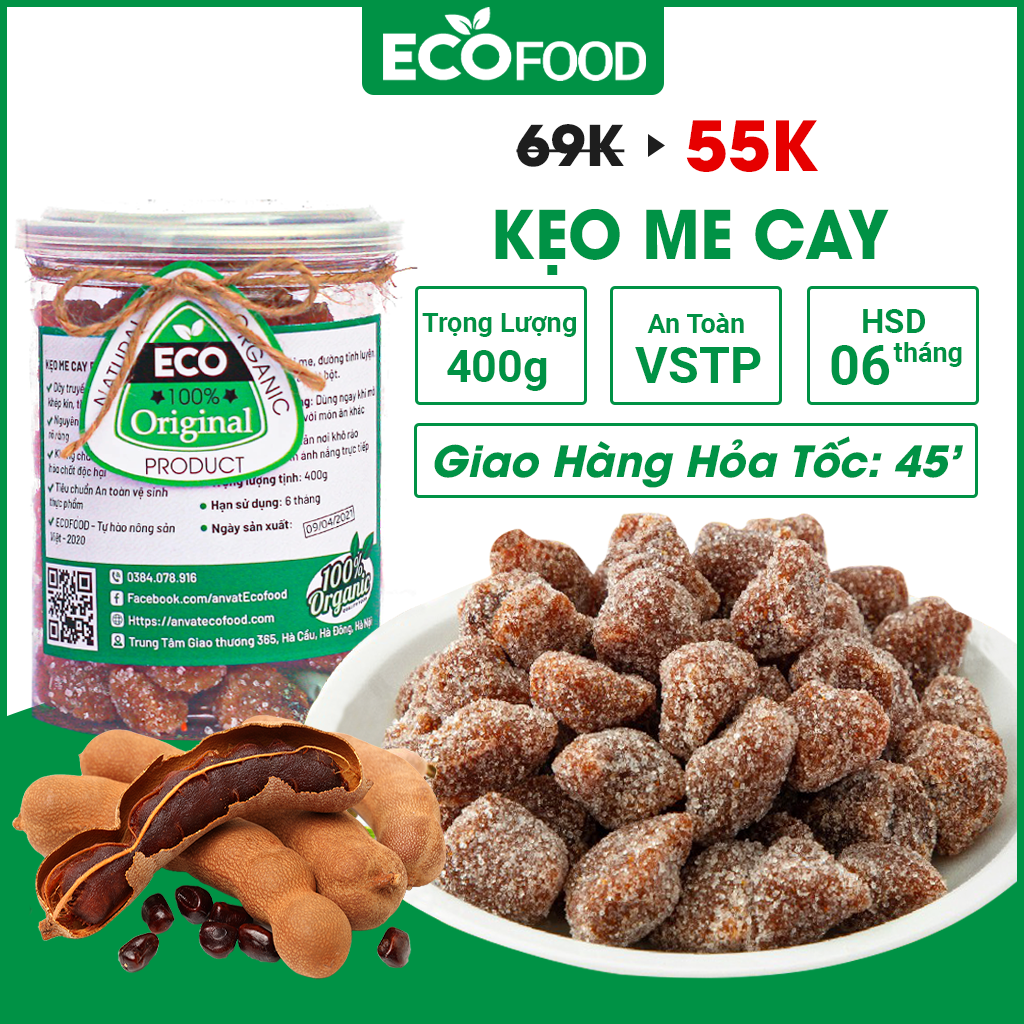
<style>
.page{position:relative;width:1024px;height:1024px;background:#ffffff}
.page>*{position:absolute;margin:0}
.t1{font:55.6px "UTMAvoBold";color:#1e1e1e;text-transform:uppercase}
.t2{font:68.7px "UTMAvoBold";color:#e60000;text-transform:uppercase}
.t3{font:66.5px "UTMAvoBold";color:#009245;text-transform:uppercase;scale:0.95 1}
.t4{font:27.1px "Roboto-Bold";color:#009245}
.t5{font:33.2px "Roboto-Bold";color:#009245}
.t6{font:45.1px "Roboto-Bold";color:#009245}
.t7{font:50px "Roboto-Bold";color:#009245}
.t8{font:54.1px "Roboto-Bold";color:#009245}
.t9{font:43px "UTMAvo-BoldItalic";color:#009245}
</style>
<div class="page">
<p class="t1" style="left:516px;top:124px;width:109px;height:43px">69K</p>
<p class="t2" style="left:686px;top:120px;width:132px;height:52px">55K</p>
<p class="t3" style="left:495px;top:209px;width:394px;height:66px">kẹo me cay</p>
<p class="t4" style="left:422px;top:313px;width:154px;height:24px">Trọng Lượng</p>
<p class="t4" style="left:647px;top:313px;width:97px;height:20px">An Toàn</p>
<p class="t5" style="left:863px;top:309px;width:62px;height:24px">HSD</p>
<p class="t4" style="left:893px;top:342px;width:69px;height:25px">tháng</p>
<p class="t6" style="left:447px;top:350px;width:100px;height:41px">400g</p>
<p class="t7" style="left:635px;top:347px;width:126px;height:36px">VSTP</p>
<p class="t8" style="left:831px;top:345px;width:59px;height:40px">06</p>
<p class="t9" style="left:434px;top:436px;width:529px;height:52px">Giao Hàng Hỏa Tốc: 45’</p>
</div>
